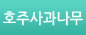
<style>
.page{position:relative;width:86px;height:35px}
.page>*{position:absolute;margin:0}
.t1{font:15px "NanumGothicBold";color:#ffffff;scale:0.95 1}
</style>
<div class="page">
<p class="t1" style="left:3px;top:11px;width:80px;height:15px">호주사과나무</p>
</div>
